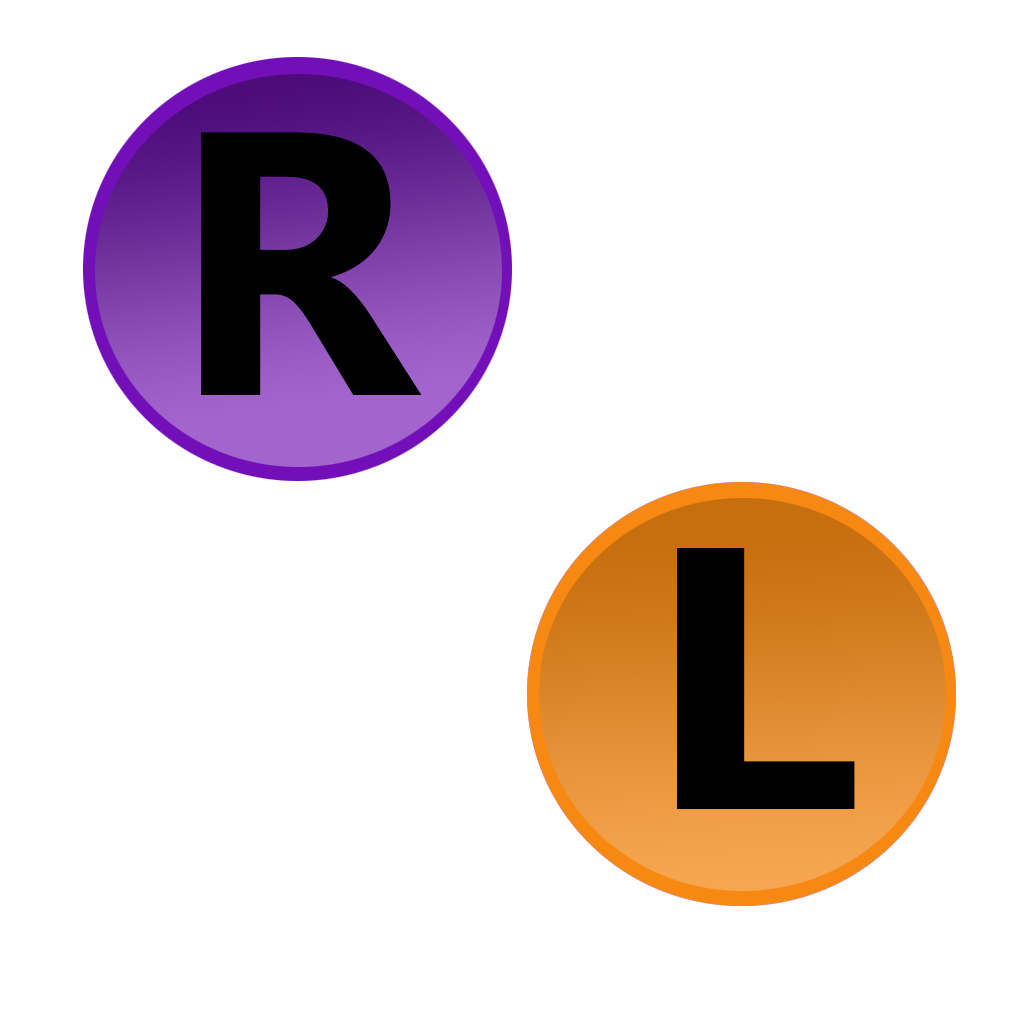
<style>
.page{position:relative;width:1024px;height:1024px;background:#ffffff}
.page>*{position:absolute;margin:0}
.t1{font:375px "MicrosoftTaiLe-Bold";color:#000000}
.t2{font:372.5px "MicrosoftTaiLe-Bold";color:#000000;scale:1.14 1}
</style>
<div class="page">
<p class="t1" style="left:201px;top:132px;width:221px;height:263px">R</p>
<p class="t2" style="left:677px;top:548px;width:178px;height:261px">L</p>
</div>
